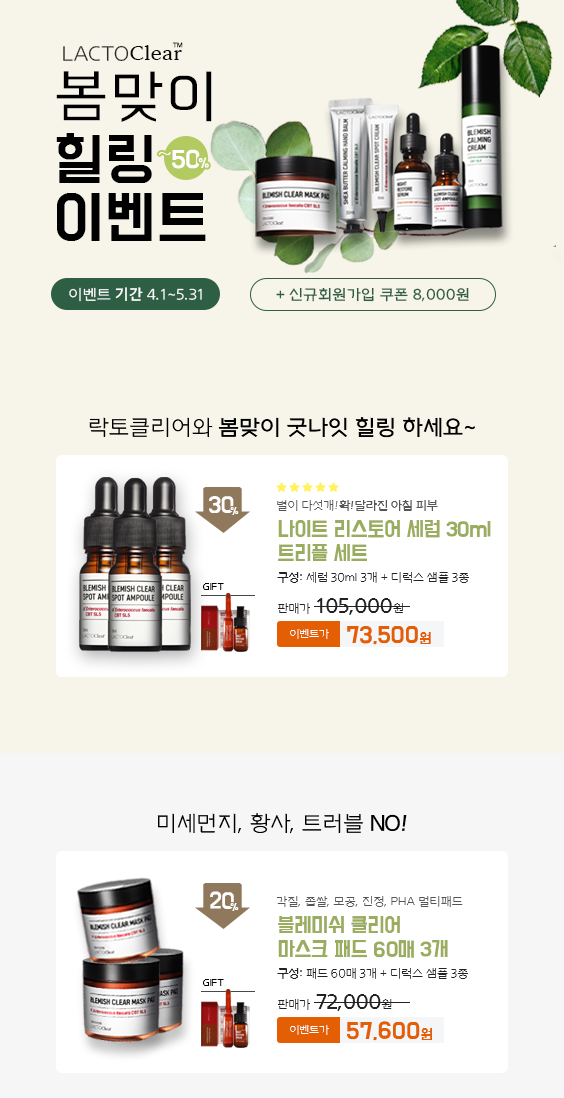
<style>
.page{position:relative;width:564px;height:1098px;background:#f7f5e9}
.page>*{position:absolute;margin:0}
.t1{font:20.4px "HealthsetGothicLight";letter-spacing:0.01em;color:#2c2c2c}
.t2{font:20.4px "Arita-buri-SemiBold_TTF";letter-spacing:0.01em;color:#070707}
.t3{font:6.1px "HealthsetGothicLight";letter-spacing:0.01em;color:#000000}
.t4{font:50.9px "BMDoHyeon";letter-spacing:0.018em;color:#000000;scale:1.05 1}
.t5{font:63.6px "BMHANNAAir";letter-spacing:0.018em;color:#000000;scale:1.05 1}
.t6{font:18.7px "BinggraeII";letter-spacing:-0.025em;color:#fefefe}
.t7{font:21.6px "BMDoHyeon";letter-spacing:-0.025em;color:#fefefe}
.t8{font:21.6px "BMDoHyeon";letter-spacing:0.018em;color:#fefefe}
.t9{font:11.5px "BMDoHyeon";letter-spacing:-0.025em;color:#fefefe}
.t10{font:14.8px "HealthsetGothicLight";color:#fefefe}
.t11{font:14.8px "HancomGothicBold";color:#fefefe}
.t12{font:14.8px "HealthsetGothicBold";letter-spacing:0.02em;color:#2e5e44}
.t13{font:22px "HealthsetGothicBold";letter-spacing:-0.01em;color:#000000}
.t14{font:22px "HealthsetGothicLight";letter-spacing:-0.01em;color:#000000}
.t15{font:19.7px "BMDoHyeon";letter-spacing:-0.025em;color:#fefefe}
.t16{font:8.5px "BMDoHyeon";letter-spacing:-0.025em;color:#fefefe}
.t17{font:12px "HealthsetGothicBold";color:#575454}
.t18{font:12px "HealthsetGothicLight";color:#575454}
.t19{font:18px/24px "BMDoHyeon";letter-spacing:-0.01em;color:#9aac5e}
.t20{font:12px "HealthsetGothicLight";color:#232222}
.t21{font:12px "HealthsetGothicBold";color:#232222}
.t22{font:10px "HealthsetGothicBold";letter-spacing:-0.01em;color:#000000}
.t23{font:20px "HealthsetGothicBold";color:#232222}
.t24{font:11px "HealthsetGothicLight";letter-spacing:-0.01em;color:#ffffff}
.t25{font:20px "BMDoHyeon";letter-spacing:0.01em;color:#e45f04}
.t26{font:13px "BMDoHyeon";letter-spacing:0.01em;color:#e45f04}
</style>
<div class="page">
<p class="t1" style="left:63px;top:45px;width:119px;height:17px">LACTO<span class="t2">Clear</span></p>
<p class="t3" style="left:172px;top:42px;width:11px;height:6px">TM</p>
<p class="t4" style="left:56px;top:71px;width:156px;height:170px"><span class="t5">봄맞이<br></span>힐링<br>이벤트</p>
<p class="t6" style="left:158px;top:149px;width:42px;height:20px">~<span class="t7">5</span><span class="t8">0</span></p>
<p class="t9" style="left:198px;top:157px;width:11px;height:11px">%</p>
<p class="t10" style="left:69px;top:287px;width:133px;height:15px">이벤트 <span class="t11">기간 </span>4.1~5.31</p>
<p class="t12" style="left:276px;top:287px;width:193px;height:15px">+ 신규회원가입 쿠폰 8,000원</p>
<p class="t13" style="left:89px;top:417px;width:386px;height:21px"><span class="t14">락토클리어와 </span>봄맞이 굿나잇 힐링 하세요~</p>
<p class="t15" style="left:209px;top:496px;width:25px;height:17px">30</p>
<p class="t16" style="left:230px;top:507px;width:9px;height:8px">%</p>
<p class="t17" style="left:277px;top:500px;width:161px;height:11px"><span class="t18">별이 다섯개!</span>확!달라진 아침 피부</p>
<p class="t19" style="left:278px;top:520px;width:213px;height:41px">나이트 리스토어 세럼 30ml<br>트리플 세트</p>
<p class="t20" style="left:277px;top:572px;width:192px;height:11px"><span class="t21">구성</span>: 세럼 30ml 3개 + 디럭스 샘플 3종</p>
<p class="t22" style="left:203px;top:583px;width:21px;height:7px">GIFT</p>
<p class="t23" style="left:278px;top:598px;width:125px;height:17px"><span class="t20">판매가  </span>105,000<span class="t20">원</span></p>
<p class="t24" style="left:290px;top:629px;width:39px;height:10px">이벤트가</p>
<p class="t25" style="left:347px;top:626px;width:84px;height:19px">73,500<span class="t26">원</span></p>
<p class="t14" style="left:157px;top:813px;width:250px;height:21px">미세먼지, 황사, 트러블 <span class="t13">NO!</span></p>
<p class="t15" style="left:210px;top:891px;width:24px;height:18px">20</p>
<p class="t16" style="left:230px;top:903px;width:9px;height:8px">%</p>
<p class="t18" style="left:277px;top:896px;width:186px;height:11px">각질, 좁쌀, 모공, 진정, PHA 멀티패드</p>
<p class="t19" style="left:278px;top:916px;width:170px;height:42px">블레미쉬 클리어 <br>마스크 패드 60매 3개</p>
<p class="t20" style="left:277px;top:968px;width:191px;height:11px"><span class="t21">구성</span>: 패드 60매 3개 + 디럭스 샘플 3종</p>
<p class="t22" style="left:203px;top:979px;width:21px;height:7px">GIFT</p>
<p class="t23" style="left:278px;top:994px;width:114px;height:17px"><span class="t20">판매가  </span>72,000<span class="t20">원</span></p>
<p class="t24" style="left:290px;top:1025px;width:39px;height:10px">이벤트가</p>
<p class="t25" style="left:347px;top:1021px;width:85px;height:20px">57,600<span class="t26">원</span></p>
</div>
